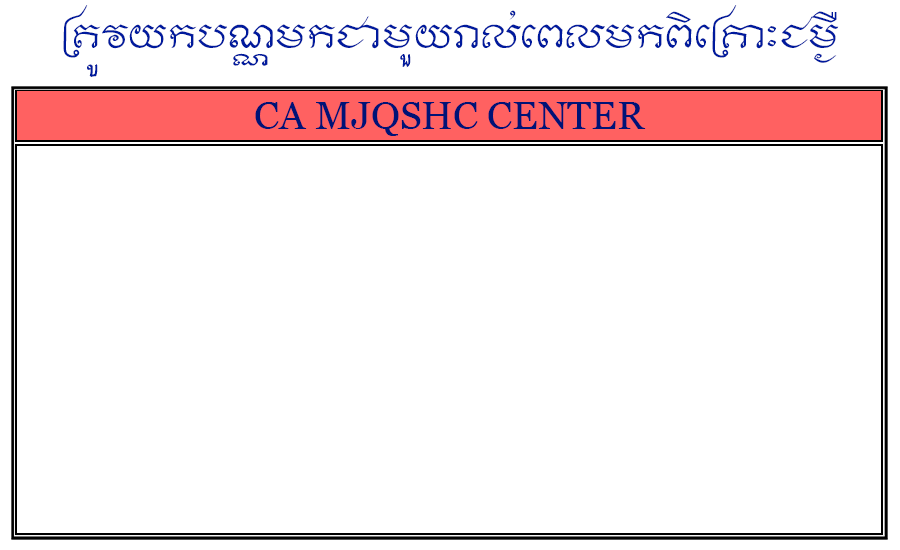
<style>
.page{position:relative;width:900px;height:550px;background:#ffffff}
.page>*{position:absolute;margin:0}
.t1{font:35.3px "KhmerPen-Surin";color:#001a9d}
.t2{font:38.8px "Georgia";color:#001376}
</style>
<div class="page">
<p class="t1" style="left:63px;top:5px;width:776px;height:72px;text-align:center">ត្រូវយកបណ្ណមកជាមួយរាល់ពេលមកពិគ្រោះជម្ងឺ</p>
<p class="t2" style="left:255px;top:102px;width:391px;height:34px">CA MJQSHC CENTER</p>
</div>
